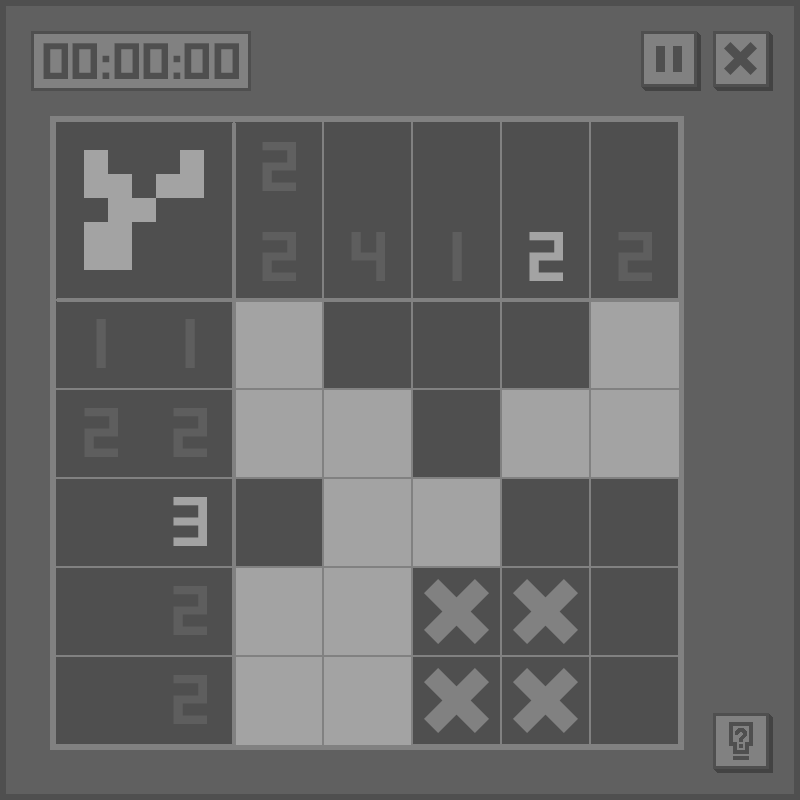
<style>
.page{position:relative;width:800px;height:800px;background:#4f4f4f}
.page>*{position:absolute;margin:0}
.t1{font:51px "SquareFont";color:#4f4f4f}
.t2{font:70px "SquareFont";color:#606060}
.t3{font:70px "SquareFont";color:#5e5e5e}
.t4{font:70px "SquareFont";color:#a3a3a3}
</style>
<div class="page">
<p class="t1" style="left:43px;top:43px;width:196px;height:36px">00:00:00</p>
<p class="t2" style="left:262px;top:142px;width:34px;height:49px">2</p>
<p class="t3" style="left:262px;top:232px;width:34px;height:49px">2</p>
<p class="t3" style="left:351px;top:232px;width:34px;height:49px">4</p>
<p class="t3" style="left:452px;top:232px;width:10px;height:49px">1</p>
<p class="t4" style="left:529px;top:232px;width:34px;height:49px">2</p>
<p class="t3" style="left:618px;top:232px;width:34px;height:49px">2</p>
<p class="t3" style="left:96px;top:319px;width:10px;height:49px">1</p>
<p class="t3" style="left:185px;top:319px;width:10px;height:49px">1</p>
<p class="t3" style="left:84px;top:408px;width:34px;height:49px">2</p>
<p class="t3" style="left:173px;top:408px;width:34px;height:49px">2</p>
<p class="t4" style="left:173px;top:497px;width:34px;height:49px">3</p>
<p class="t3" style="left:173px;top:586px;width:34px;height:49px">2</p>
<p class="t3" style="left:173px;top:675px;width:34px;height:49px">2</p>
</div>
